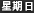
<style>
.page{position:relative;width:34px;height:13px}
.page>*{position:absolute;margin:0}
.t1{font:11.1px "AdobeHeitiStd-Regular";color:#ffffff}
</style>
<div class="page">
<p class="t1" style="left:1px;top:1px;width:32px;height:10px">星期日</p>
</div>
